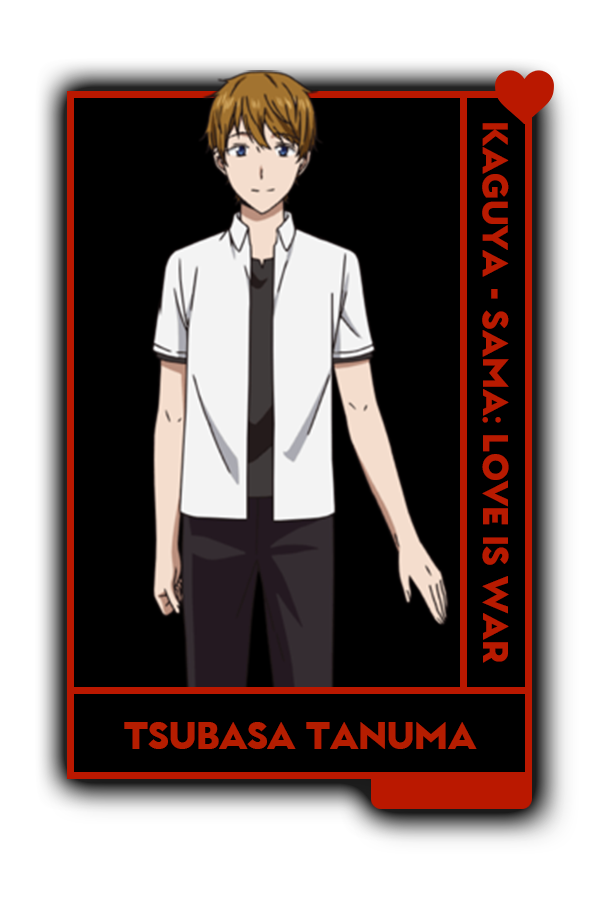
<style>
.page{position:relative;width:600px;height:900px;background:#000000}
.page>*{position:absolute;margin:0}
.t1{font:34px "GarnetCapitalsBlack-Regular";color:#b52616}
.t2{font:35.7px "GarnetCapitalsBlack-Regular";color:#b22818}
</style>
<div class="page">
<p class="t1" style="left:482px;top:123px;width:27px;height:540px;rotate:90deg">Kaguya - Sama: Love is war</p>
<p class="t2" style="left:124px;top:722px;width:353px;height:27px">Tsubasa Tanuma</p>
</div>
